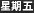
<style>
.page{position:relative;width:34px;height:13px;background:#ffffff}
.page>*{position:absolute;margin:0}
.t1{font:11.1px "AdobeHeitiStd-Regular";color:#ffffff}
</style>
<div class="page">
<p class="t1" style="left:0px;top:1px;width:33px;height:10px">星期五</p>
</div>
